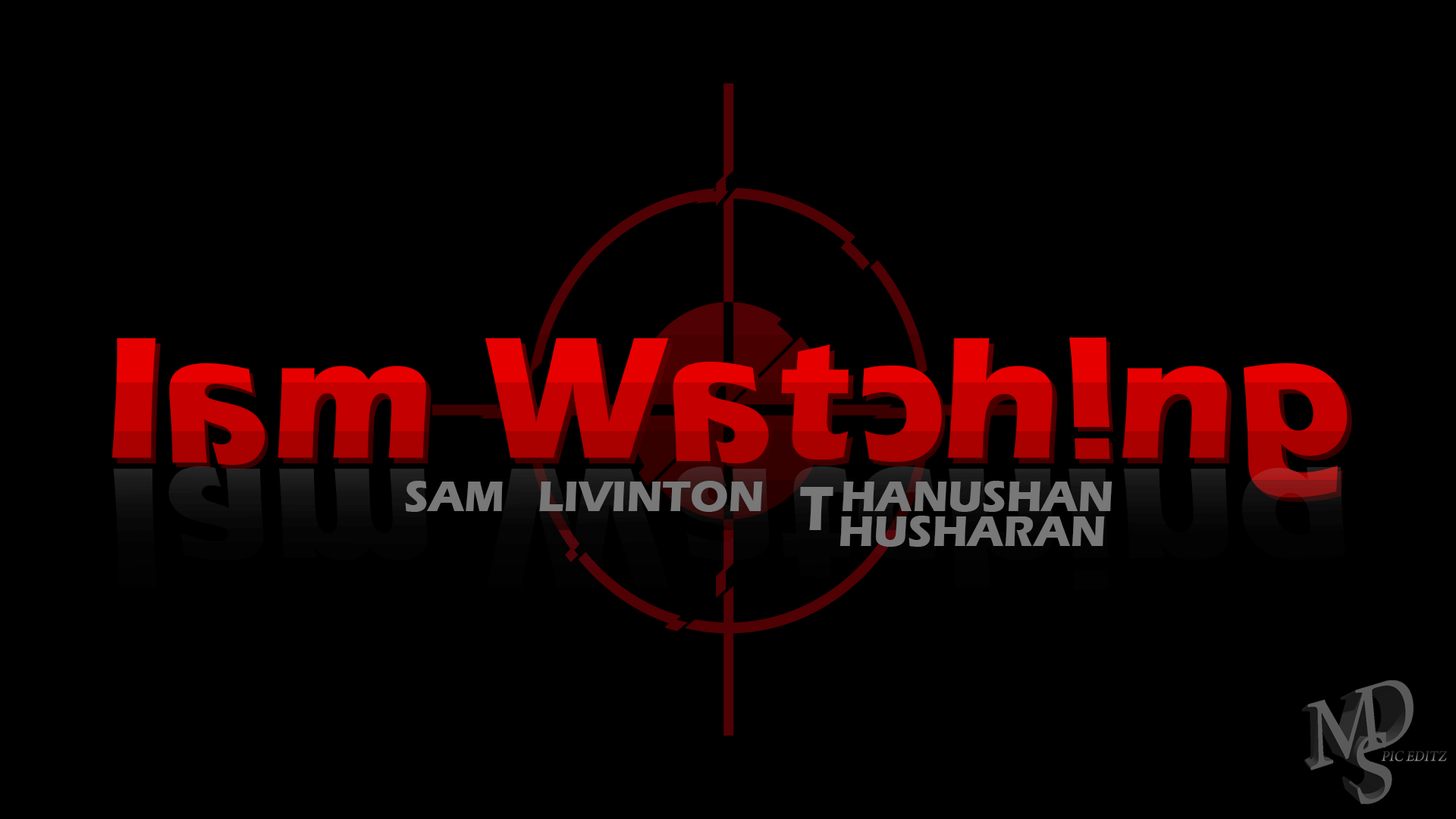
<style>
.page{position:relative;width:1456px;height:819px;background:#000000}
.page>*{position:absolute;margin:0}
.t1{font:179.2px "ErasITC-Bold"}
.t2{font:195px "ErasITC-Bold";scale:0.91 1}
.t3{font:184.1px "ErasITC-Bold";scale:0.97 1}
.t4{font:44.4px/34.8px "ErasITC-Bold";color:#787878}
.t5{font:64.4px/34.8px "ErasITC-Bold";letter-spacing:0.08em;color:#787878;scale:0.82 1}
</style>
<div class="page">
<p class="t1" style="left:1069px;top:337px;width:41px;height:122px">i</p>
<p class="t1" style="left:1073px;top:342px;width:41px;height:121px">i</p>
<p class="t2" style="left:169px;top:363px;width:96px;height:102px;rotate:180deg">a</p>
<p class="t2" style="left:673px;top:362px;width:96px;height:101px;rotate:180deg">a</p>
<p class="t2" style="left:678px;top:366px;width:96px;height:101px;rotate:180deg">a</p>
<p class="t3" style="left:862px;top:366px;width:80px;height:96px;rotate:180deg">c</p>
<p class="t1" style="left:1244px;top:363px;width:104px;height:134px;rotate:180deg">g</p>
<p class="t2" style="left:173px;top:368px;width:96px;height:101px;rotate:180deg">a</p>
<p class="t3" style="left:866px;top:370px;width:80px;height:96px;rotate:180deg">c</p>
<p class="t1" style="left:1248px;top:368px;width:104px;height:134px;rotate:180deg">g</p>
<p class="t4" style="left:405px;top:481px;width:707px;height:66px;text-align:center">SAM   LIVINTON    <span class="t5">T</span>HANUSHAN<br>                        HUSHARAN</p>
</div>
